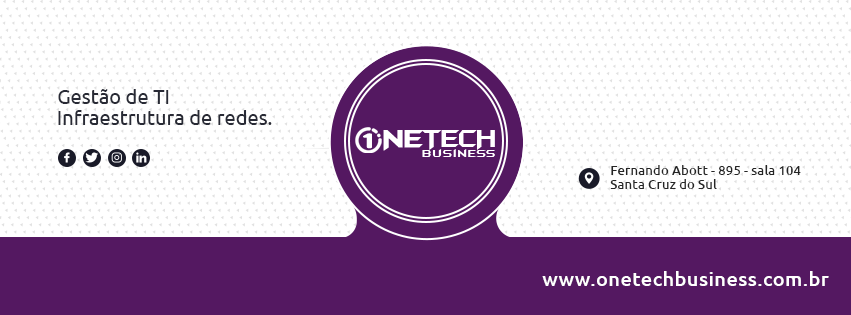
<style>
.page{position:relative;width:851px;height:315px;background:#ffffff}
.page>*{position:absolute;margin:0}
.t1{font:20px "Ubuntu-Regular";color:#282a35}
.t2{font:21.6px "Neon80s";letter-spacing:-0.09em;color:#ffffff;text-transform:uppercase;font-weight:bold;scale:1.85 1}
.t3{font:29.4px "BatmanForeverAlternate";letter-spacing:-0.07em;color:#ffffff;text-transform:uppercase;font-weight:bold;scale:0.86 1}
.t4{font:29.4px "BatmanForeverAlternate";letter-spacing:-0.07em;color:#ffffff;text-transform:uppercase;scale:0.86 1}
.t5{font:11px "BatmanForeverAlternate";letter-spacing:0.07em;color:#ffffff}
.t6{font:13.3px/14px "Ubuntu-Medium";color:#252525}
.t7{font:20px "Ubuntu-Medium";letter-spacing:0.02em;color:#ffffff}
</style>
<div class="page">
<p class="t1" style="left:58px;top:89px;width:111px;height:15px">Gestão de TI</p>
<p class="t1" style="left:58px;top:110px;width:214px;height:15px">Infraestrutura de redes.</p>
<p class="t2" style="left:363px;top:133px;width:9px;height:16px">1</p>
<p class="t3" style="left:383px;top:130px;width:40px;height:21px">ne</p>
<p class="t4" style="left:421px;top:130px;width:74px;height:20px">Tech</p>
<p class="t5" style="left:422px;top:149px;width:73px;height:8px">Business</p>
<p class="t6" style="left:610px;top:165px;width:191px;height:24px">Fernando Abott - 895 - sala 104<br>Santa Cruz do Sul</p>
<p class="t7" style="left:542px;top:271px;width:287px;height:15px">www.onetechbusiness.com.br</p>
</div>
